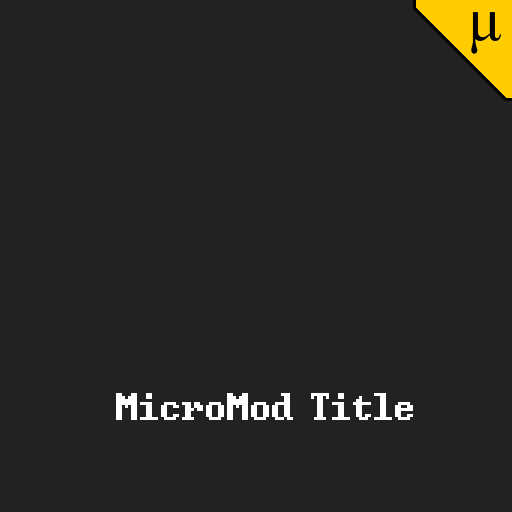
<style>
.page{position:relative;width:512px;height:512px;background:#222222}
.page>*{position:absolute;margin:0}
.t1{font:48px "DwarfFortressVan";color:#ffffff}
</style>
<div class="page">
<p class="t1" style="left:116px;top:393px;width:297px;height:27px">MicroMod Title</p>
</div>
